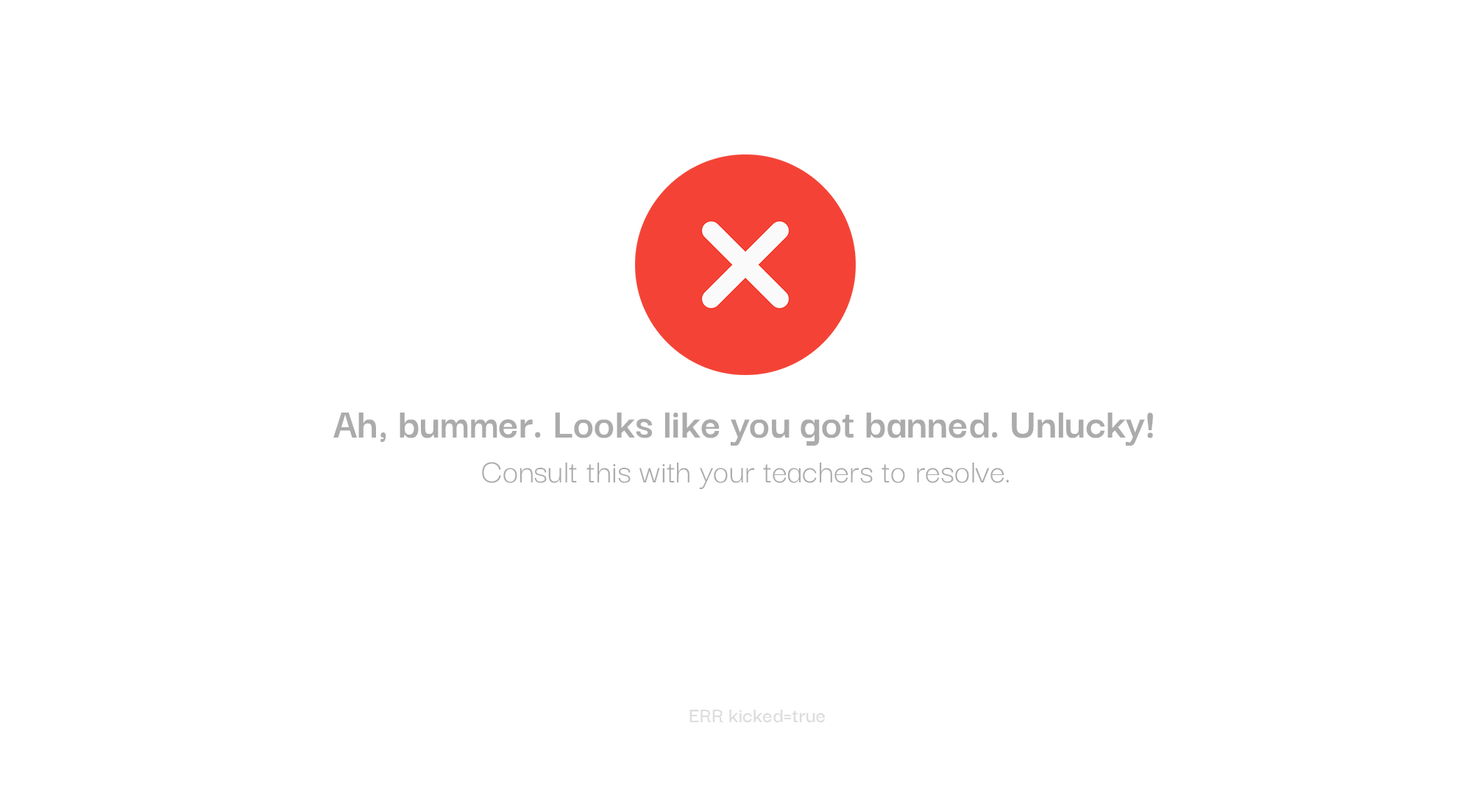
<style>
.page{position:relative;width:1479px;height:806px;background:#ffffff}
.page>*{position:absolute;margin:0}
.t1{font:44.1px "DarkerGrotesque-Bold";color:#ababab}
.t2{font:35.3px "DarkerGrotesque-Regular";color:#ababab}
.t3{font:22.1px "DarkerGrotesque-SemiBold";color:#dddddd}
</style>
<div class="page">
<p class="t1" style="left:333px;top:413px;width:820px;height:33px">Ah, bummer. Looks like you got banned. Unlucky!</p>
<p class="t2" style="left:482px;top:462px;width:527px;height:27px">Consult this with your teachers to resolve.</p>
<p class="t3" style="left:689px;top:710px;width:136px;height:13px">ERR kicked=true</p>
</div>
